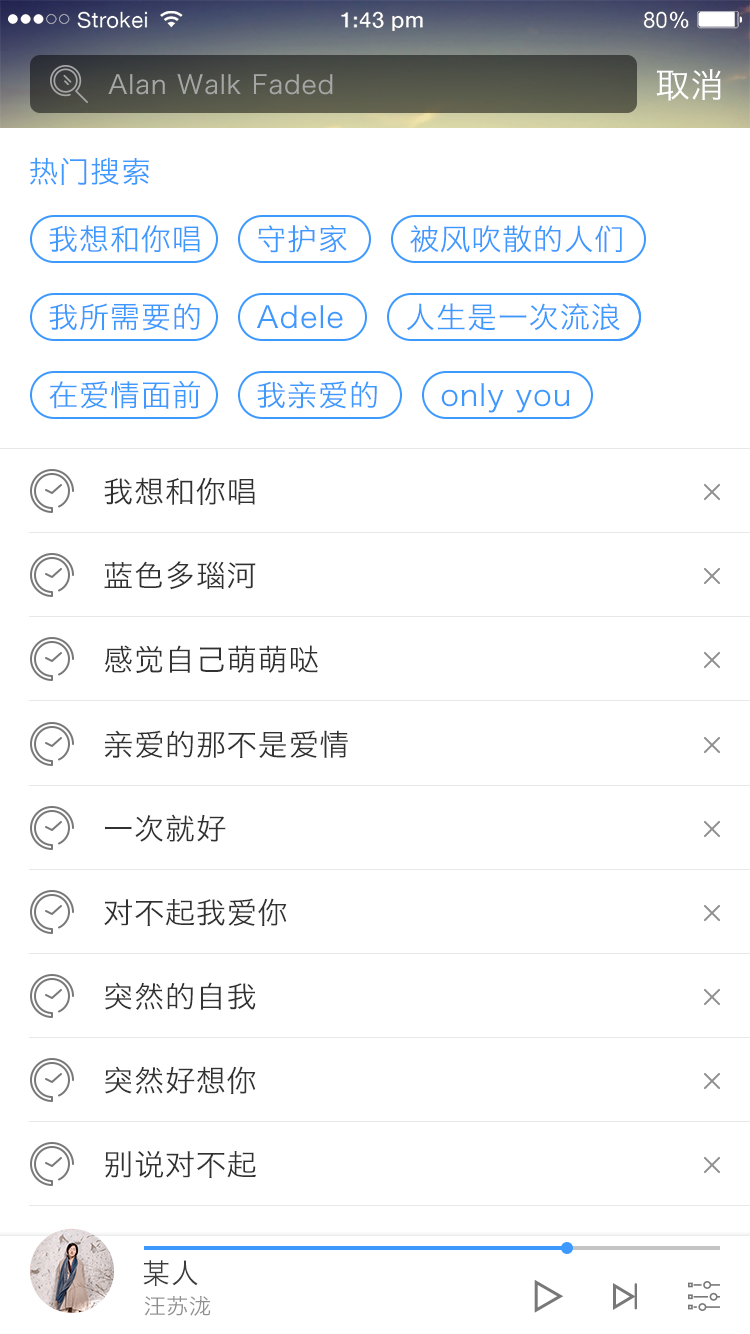
<style>
.page{position:relative;width:750px;height:1334px;background:#ffffff}
.page>*{position:absolute;margin:0}
.t1{font:26px "HiraginoSansGB-W3";letter-spacing:0.03em;color:#a6a6a6}
.t2{font:34px "HiraginoSansGB-W3";letter-spacing:0.03em;color:#ffffff}
.t3{font:30px "HiraginoSansGB-W3";letter-spacing:0.03em;color:#3e99ff}
.t4{font:30px "HiraginoSansGB-W3";letter-spacing:0.03em;color:#313131}
.t5{font:28px "HiraginoSansGB-W3";letter-spacing:0.03em;color:#3b3b3b}
.t6{font:22px "HiraginoSansGB-W3";letter-spacing:0.03em;color:#8f8f8f}
</style>
<div class="page">
<p class="t1" style="left:108px;top:74px;width:225px;height:21px">Alan Walk Faded</p>
<p class="t2" style="left:656px;top:69px;width:65px;height:32px">取消</p>
<p class="t3" style="left:30px;top:157px;width:119px;height:28px">热门搜索</p>
<p class="t3" style="left:49px;top:225px;width:151px;height:28px">我想和你唱</p>
<p class="t3" style="left:258px;top:224px;width:89px;height:29px">守护家</p>
<p class="t3" style="left:410px;top:225px;width:212px;height:28px">被风吹散的人们</p>
<p class="t3" style="left:49px;top:303px;width:151px;height:28px">我所需要的</p>
<p class="t3" style="left:256px;top:305px;width:87px;height:24px">Adele</p>
<p class="t3" style="left:407px;top:303px;width:213px;height:28px">人生是一次流浪</p>
<p class="t3" style="left:49px;top:381px;width:151px;height:28px">在爱情面前</p>
<p class="t3" style="left:257px;top:381px;width:120px;height:28px">我亲爱的</p>
<p class="t3" style="left:441px;top:383px;width:129px;height:30px">only you</p>
<p class="t4" style="left:104px;top:477px;width:151px;height:28px">我想和你唱</p>
<p class="t4" style="left:104px;top:561px;width:152px;height:29px">蓝色多瑙河</p>
<p class="t4" style="left:104px;top:645px;width:214px;height:28px">感觉自己萌萌哒</p>
<p class="t4" style="left:104px;top:730px;width:244px;height:28px">亲爱的那不是爱情</p>
<p class="t4" style="left:105px;top:814px;width:121px;height:28px">一次就好</p>
<p class="t4" style="left:104px;top:898px;width:183px;height:28px">对不起我爱你</p>
<p class="t4" style="left:105px;top:982px;width:151px;height:28px">突然的自我</p>
<p class="t4" style="left:105px;top:1066px;width:151px;height:28px">突然好想你</p>
<p class="t4" style="left:105px;top:1151px;width:152px;height:27px">别说对不起</p>
<p class="t5" style="left:143px;top:1260px;width:55px;height:26px">某人</p>
<p class="t6" style="left:144px;top:1296px;width:67px;height:20px">汪苏泷</p>
</div>
